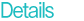
<style>
.page{position:relative;width:84px;height:21px;background:#ffffff}
.page>*{position:absolute;margin:0}
.t1{font:20px "GothicMB101Pro-Regular";letter-spacing:-0.06em;color:#1dbcc0;scale:0.9 1}
</style>
<div class="page">
<p class="t1" style="left:1px;top:2px;width:53px;height:16px">Details</p>
</div>
